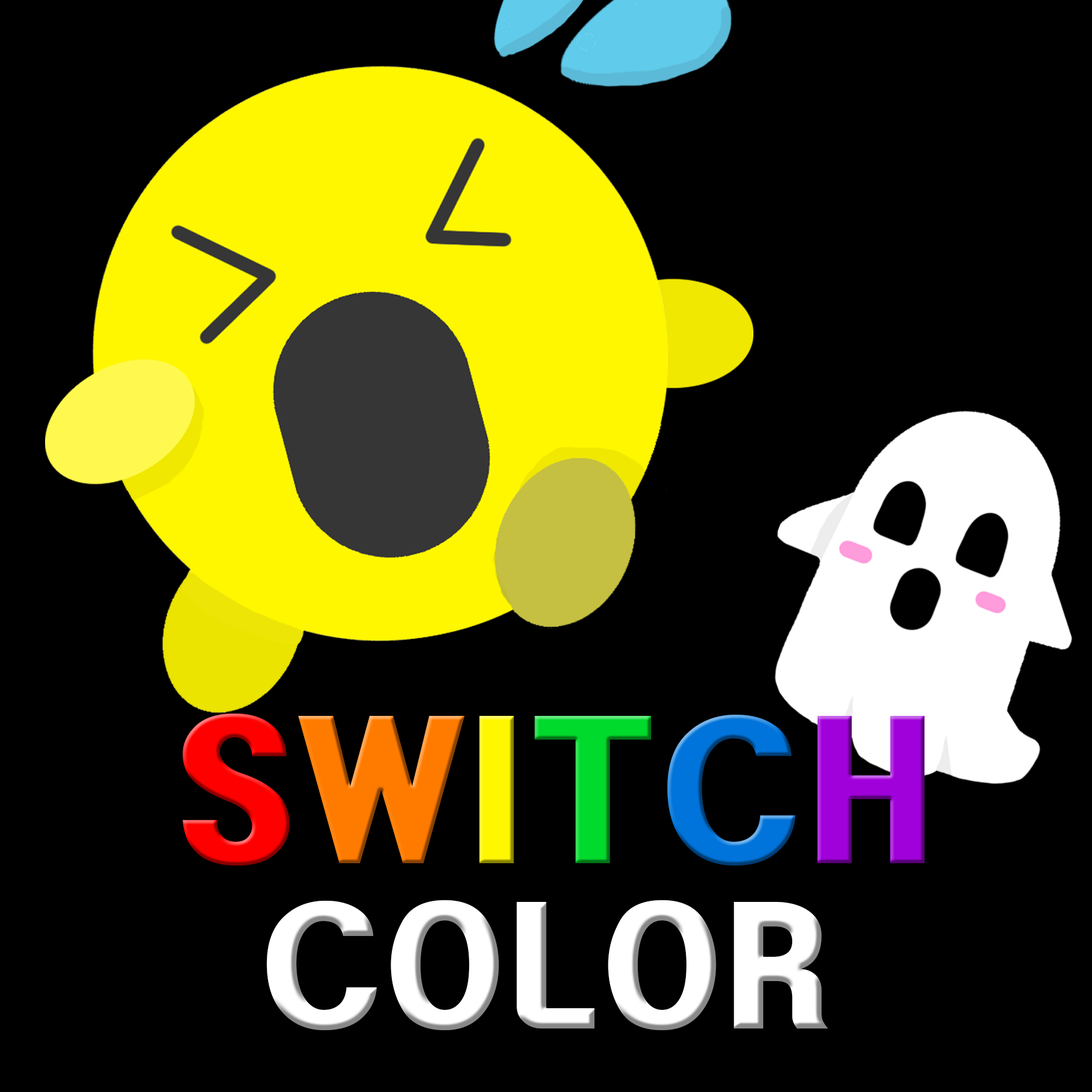
<style>
.page{position:relative;width:1092px;height:1092px;background:#000000}
.page>*{position:absolute;margin:0}
.t1{font:168.5px "HeadlineR-HM";color:#ff0000}
.t2{font:168.5px "HeadlineR-HM";color:#ff7b00}
.t3{font:168.5px "HeadlineR-HM";color:#fff700}
.t4{font:168.5px "HeadlineR-HM";color:#00da2c}
.t5{font:168.5px "HeadlineR-HM";color:#0074da}
.t6{font:168.5px "HeadlineR-HM";color:#a000da}
.t7{font:144.4px "HeadlineR-HM";color:#ffffff}
</style>
<div class="page">
<p class="t1" style="left:183px;top:714px;width:742px;height:151px">S<span class="t2">W</span><span class="t3">I</span><span class="t4">T</span><span class="t5">C</span><span class="t6">H</span></p>
<p class="t7" style="left:266px;top:900px;width:562px;height:130px">COLOR</p>
</div>
